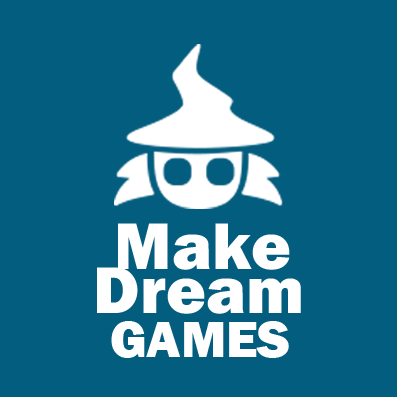
<style>
.page{position:relative;width:397px;height:397px;background:#035d7e}
.page>*{position:absolute;margin:0}
.t1{font:68.2px "FranklinGothic-Heavy";color:#ffffff}
.t2{font:53.5px "FranklinGothic-Heavy";color:#ffffff}
</style>
<div class="page">
<p class="t1" style="left:118px;top:223px;width:172px;height:47px">Make</p>
<p class="t1" style="left:97px;top:267px;width:204px;height:47px">Dream</p>
<p class="t2" style="left:111px;top:321px;width:178px;height:37px">GAMES</p>
</div>
